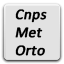
<style>
.page{position:relative;width:64px;height:64px;background:#e2e2e2}
.page>*{position:absolute;margin:0}
.t1{font:15px "Calibri";letter-spacing:0.005em;color:#000000;font-weight:bold;font-style:italic}
</style>
<div class="page">
<p class="t1" style="left:15px;top:9px;width:32px;height:47px">Cnps<br>Met<br>Orto</p>
</div>
